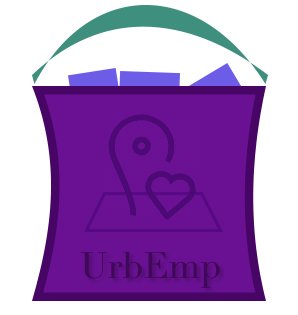
<style>
.page{position:relative;width:298px;height:315px;background:#ffffff}
.page>*{position:absolute;margin:0}
.t1{font:36px "Didot";color:#4f0a6c}
</style>
<div class="page">
<p class="t1" style="left:80px;top:251px;width:140px;height:37px">UrbEmp</p>
</div>
